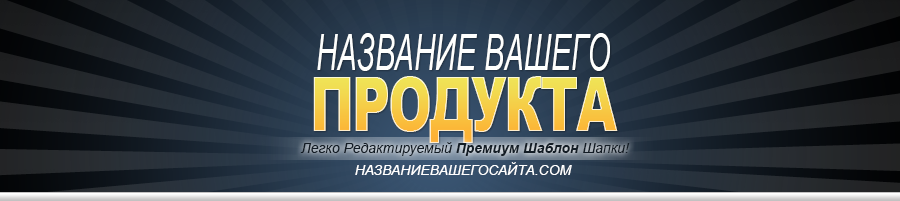
<style>
.page{position:relative;width:900px;height:201px}
.page>*{position:absolute;margin:0}
.t1{font:50.4px "ArialNarrow-Italic";color:#fefffe;text-transform:uppercase;scale:0.71 1}
.t2{font:74.5px "Arial-Black";letter-spacing:-0.05em;text-transform:uppercase;scale:0.71 1}
.t3{font:14px "Arial-ItalicMT";color:#131c25}
.t4{font:14px "Arial-BoldItalicMT";color:#131c25}
.t5{font:14px "Arial-ItalicMT";color:#ffffff;text-transform:uppercase}
</style>
<div class="page">
<p class="t1" style="left:317px;top:33px;width:293px;height:38px">НАЗВАНИЕ ВАШЕГО</p>
<p class="t2" style="left:313px;top:76px;width:305px;height:67px">ПРОДУКТА</p>
<p class="t3" style="left:300px;top:142px;width:330px;height:14px">Легко Редактируемый <span class="t4">Премиум Шаблон </span>Шапки!</p>
<p class="t5" style="left:355px;top:162px;width:217px;height:13px">названиеВАШегоСАЙТа.com</p>
</div>
